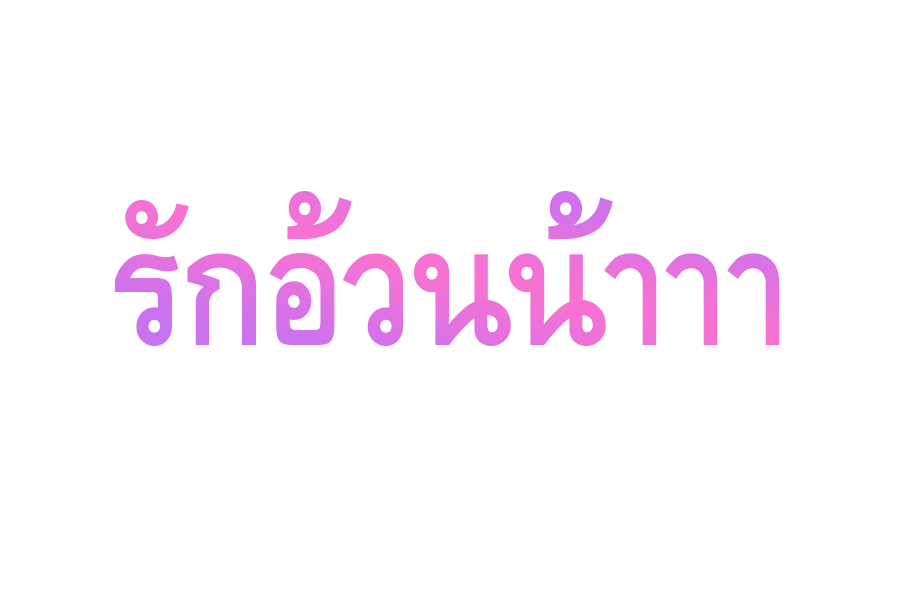
<style>
.page{position:relative;width:900px;height:600px;background:#ffffff}
.page>*{position:absolute;margin:0}
.t1{font:229px "DilleniaUPCBold";color:#e872dc}
</style>
<div class="page">
<p class="t1" style="left:114px;top:191px;width:666px;height:155px">รักอ้วนน้าาา</p>
</div>
